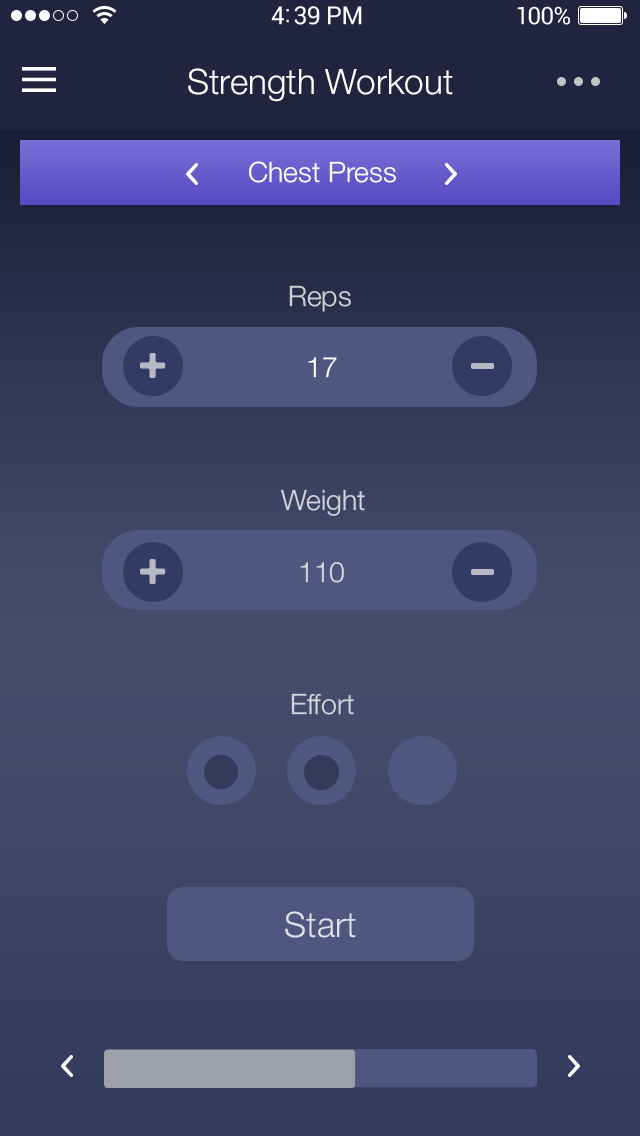
<style>
.page{position:relative;width:640px;height:1136px}
.page>*{position:absolute;margin:0}
.t1{font:35px "HelveticaNeue-Light";color:#ffffff}
.t2{font:28px "HelveticaNeue-Light";color:#ffffff}
.t3{font:28px "HelveticaNeue-Light";color:#cfd0d4}
.t4{font:28px "HelveticaNeue-Light";color:#d2d3d8}
.t5{font:28px "HelveticaNeue-Light";color:#d5d6de}
.t6{font:28px "HelveticaNeue-Light";color:#d3d4da}
.t7{font:35px "HelveticaNeue-Light";color:#e1e2e8}
</style>
<div class="page">
<p class="t1" style="left:188px;top:68px;width:265px;height:34px">Strength Workout</p>
<p class="t2" style="left:249px;top:161px;width:147px;height:22px">Chest Press</p>
<p class="t3" style="left:289px;top:285px;width:62px;height:27px">Reps</p>
<p class="t2" style="left:308px;top:357px;width:29px;height:21px">17</p>
<p class="t4" style="left:281px;top:489px;width:84px;height:27px">Weight</p>
<p class="t5" style="left:300px;top:562px;width:44px;height:21px">110</p>
<p class="t6" style="left:291px;top:693px;width:63px;height:22px">Effort</p>
<p class="t7" style="left:285px;top:911px;width:71px;height:27px">Start</p>
</div>
